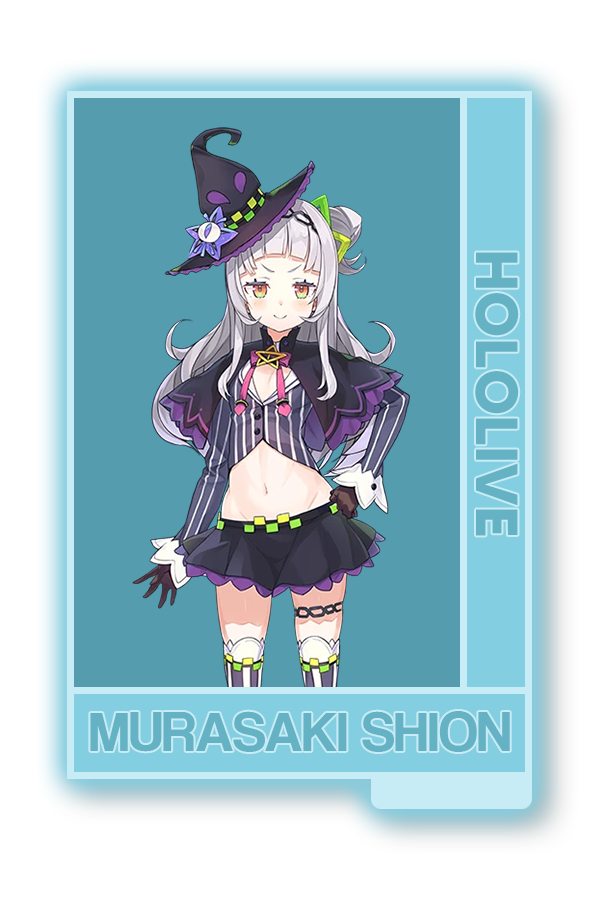
<style>
.page{position:relative;width:600px;height:900px;background:#549cae}
.page>*{position:absolute;margin:0}
.t1{font:59.2px "MADETOMMY-Bold";color:#66b2c5}
.t2{font:57.6px "CoolveticaRg-Regular";color:#66b2c5}
</style>
<div class="page">
<p class="t1" style="left:475px;top:252px;width:44px;height:284px;rotate:90deg">HOLOLIVE</p>
<p class="t2" style="left:90px;top:711px;width:420px;height:41px">MURASAKI SHION</p>
</div>
